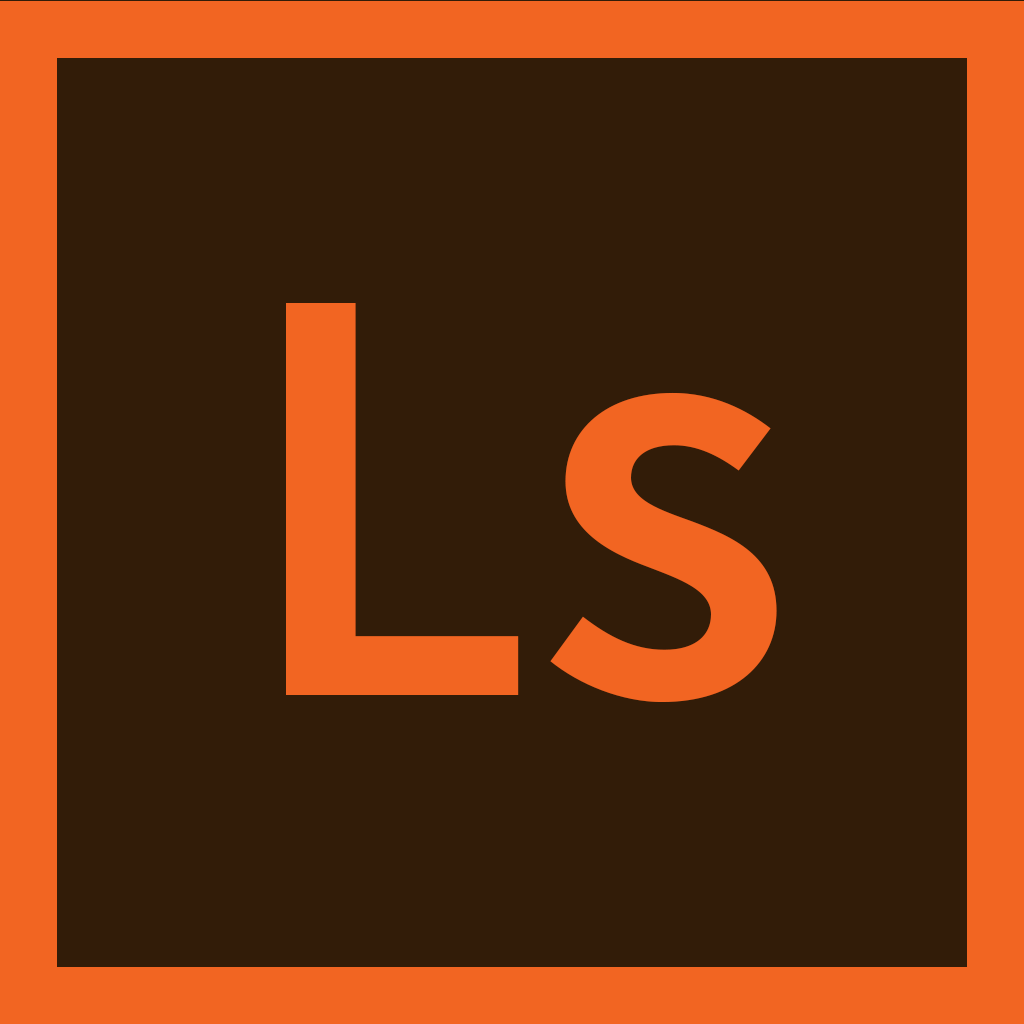
<style>
.page{position:relative;width:1024px;height:1024px;background:#321c08}
.page>*{position:absolute;margin:0}
.t1{font:600px "SourceSansPro-Semibold";color:#f26522}
</style>
<div class="page">
<p class="t1" style="left:286px;top:303px;width:491px;height:399px">Ls</p>
</div>
